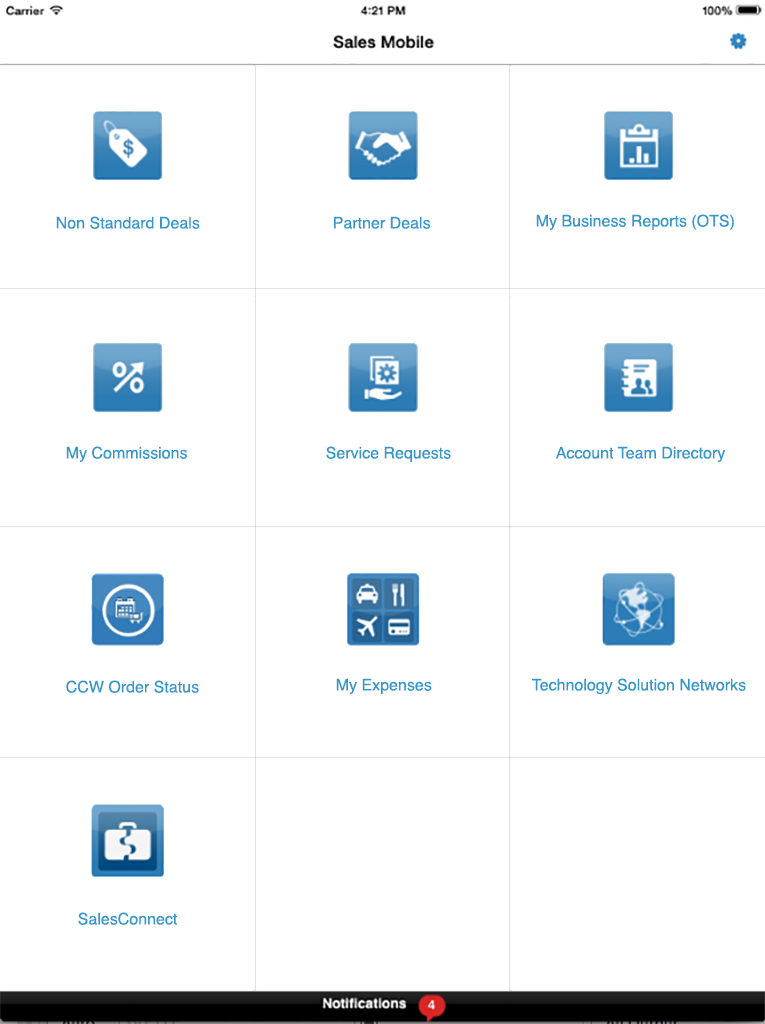
<style>
.page{position:relative;width:765px;height:1024px;background:#ffffff}
.page>*{position:absolute;margin:0}
.t1{font:16px "Helvetica";color:#3399cc}
</style>
<div class="page">
<p class="t1" style="left:56px;top:216px;width:144px;height:13px">Non Standard Deals</p>
<p class="t1" style="left:334px;top:216px;width:97px;height:13px">Partner Deals</p>
<p class="t1" style="left:536px;top:214px;width:198px;height:16px">My Business Reports (OTS)</p>
<p class="t1" style="left:66px;top:446px;width:122px;height:16px">My Commissions</p>
<p class="t1" style="left:326px;top:446px;width:125px;height:16px">Service Requests</p>
<p class="t1" style="left:555px;top:446px;width:171px;height:16px">Account Team Directory</p>
<p class="t1" style="left:336px;top:678px;width:96px;height:16px">My Expenses</p>
<p class="t1" style="left:532px;top:678px;width:214px;height:16px">Technology Solution Networks</p>
<p class="t1" style="left:66px;top:680px;width:133px;height:13px">CCW Order Status</p>
<p class="t1" style="left:78px;top:912px;width:99px;height:13px">SalesConnect</p>
</div>
